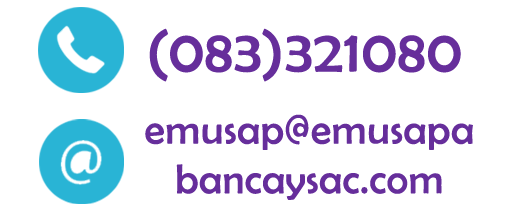
<style>
.page{position:relative;width:512px;height:211px;background:#ffffff}
.page>*{position:absolute;margin:0}
.t1{font:59.8px "BerlinSansFB-Reg";letter-spacing:0.015em;color:#662e9b}
.t2{font:41.3px "BerlinSansFB-Reg";letter-spacing:0.015em;color:#662e9b}
</style>
<div class="page">
<p class="t1" style="left:149px;top:28px;width:312px;height:54px">(083)321080</p>
<p class="t2" style="left:145px;top:114px;width:328px;height:86px;text-align:center">emusap@emusapabancaysac.com</p>
</div>
